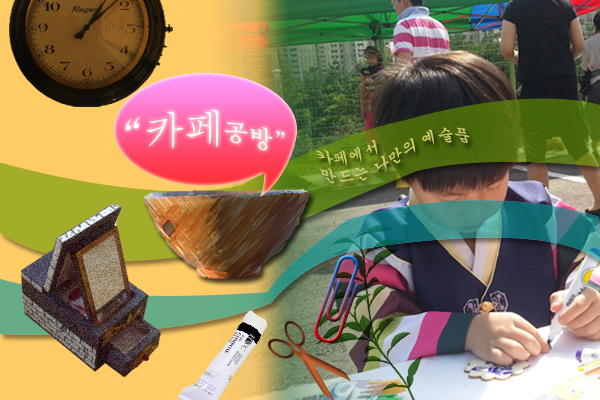
<style>
.page{position:relative;width:600px;height:400px}
.page>*{position:absolute;margin:0}
.t1{font:40.7px "Batang";color:#ffffff}
.t2{font:25.4px "Batang";color:#ffffff}
.t3{font:16px "Gungsuh";color:#cccc66}
</style>
<div class="page">
<p class="t1" style="left:125px;top:109px;width:160px;height:42px">“카페<span class="t2">공방”</span></p>
<p class="t3" style="left:316px;top:127px;width:154px;height:57px;rotate:-13deg">카페에서<br>만드는 나만의 예술품</p>
</div>
